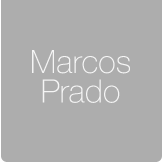
<style>
.page{position:relative;width:164px;height:164px;background:#adadad}
.page>*{position:absolute;margin:0}
.t1{font:32.3px/29.6px "Helvetica35-Thin";color:#f5f5f5}
</style>
<div class="page">
<p class="t1" style="left:32px;top:50px;width:98px;height:53px;text-align:center">Marcos<br>Prado</p>
</div>
